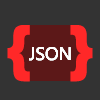
<style>
.page{position:relative;width:100px;height:100px;background:#333333}
.page>*{position:absolute;margin:0}
.t1{font:60px "GillSans-UltraBold";color:#ff2828}
.t2{font:18px "Ebrima";color:#ffffff}
</style>
<div class="page">
<p class="t1" style="left:7px;top:25px;width:86px;height:57px">{  }</p>
<p class="t2" style="left:29px;top:47px;width:42px;height:14px">JSON</p>
<p class="t2" style="left:29px;top:47px;width:42px;height:14px">JSON</p>
<p class="t2" style="left:29px;top:47px;width:42px;height:14px">JSON</p>
<p class="t2" style="left:29px;top:47px;width:42px;height:14px">JSON</p>
</div>
